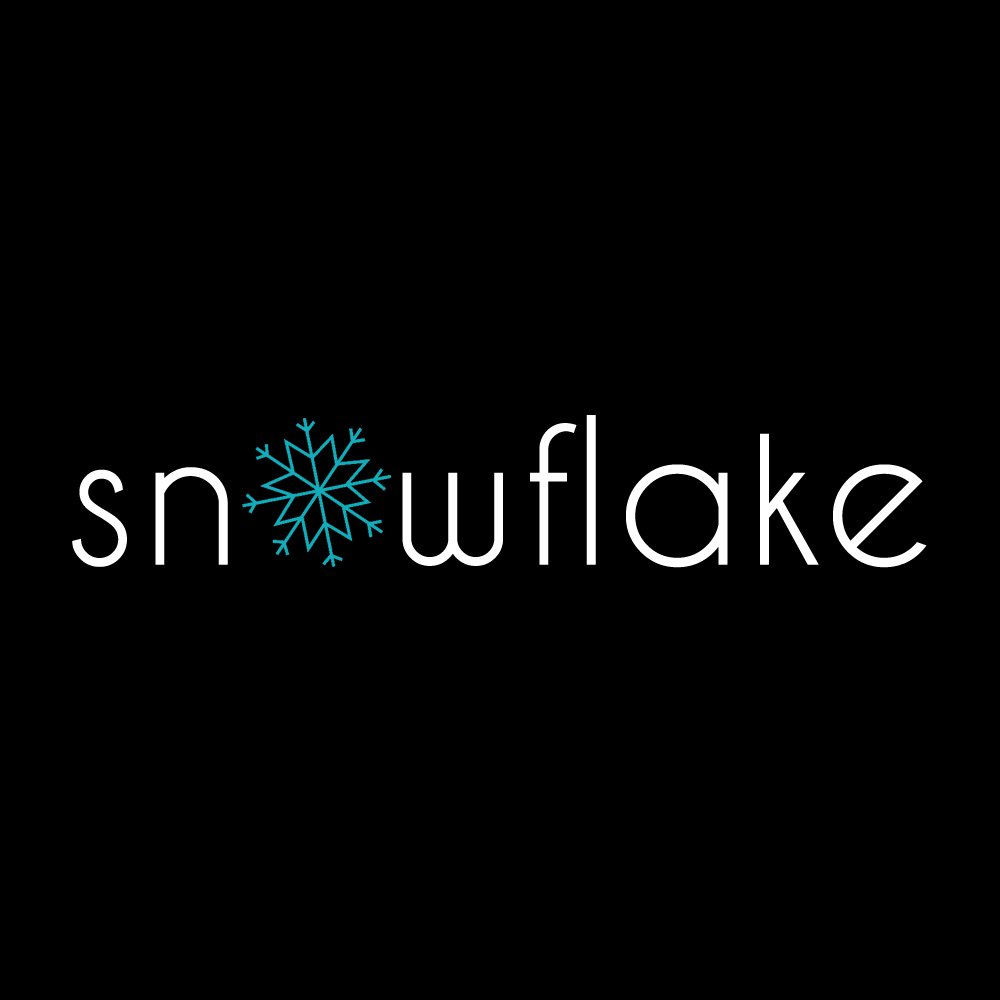
<style>
.page{position:relative;width:1000px;height:1000px;background:#000000}
.page>*{position:absolute;margin:0}
.t1{font:190.8px "CaviarDreams";color:#ffffff;font-weight:bold}
</style>
<div class="page">
<p class="t1" style="left:72px;top:415px;width:855px;height:153px">sn  wflake</p>
</div>
